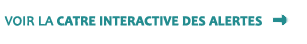
<style>
.page{position:relative;width:307px;height:44px;background:#ffffff}
.page>*{position:absolute;margin:0}
.t1{font:13.3px "Candara-Bold";color:#238c8f;font-weight:bold}
.t2{font:13.3px "Candara";color:#238c8f;font-weight:bold}
</style>
<div class="page">
<p class="t1" style="left:4px;top:16px;width:258px;height:10px"><span class="t2">VOIR LA</span> CATRE INTERACTIVE DES ALERTES</p>
</div>
